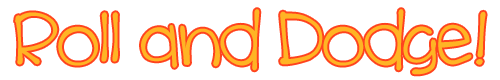
<style>
.page{position:relative;width:500px;height:80px;background:#ffffff}
.page>*{position:absolute;margin:0}
.t1{font:76px "cinnamoncake";color:#ffb424}
</style>
<div class="page">
<p class="t1" style="left:15px;top:9px;width:471px;height:66px">Roll and Dodge!</p>
</div>
